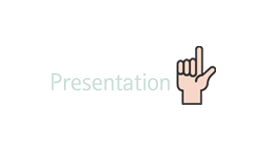
<style>
.page{position:relative;width:280px;height:150px;background:#ffffff}
.page>*{position:absolute;margin:0}
.t1{font:24px "SeN-CM";color:#c6dfd6}
</style>
<div class="page">
<p class="t1" style="left:51px;top:73px;width:119px;height:18px">Presentation</p>
</div>
